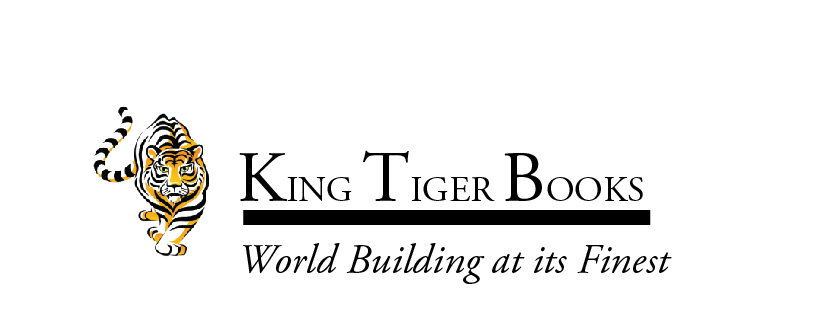
<style>
.page{position:relative;width:820px;height:312px;background:#ffffff}
.page>*{position:absolute;margin:0}
.t1{font:41.7px "AGaramondPro-Italic";color:#000000}
</style>
<div class="page">
<p class="t1" style="left:243px;top:243px;width:429px;height:41px">World Building at its Finest</p>
</div>
